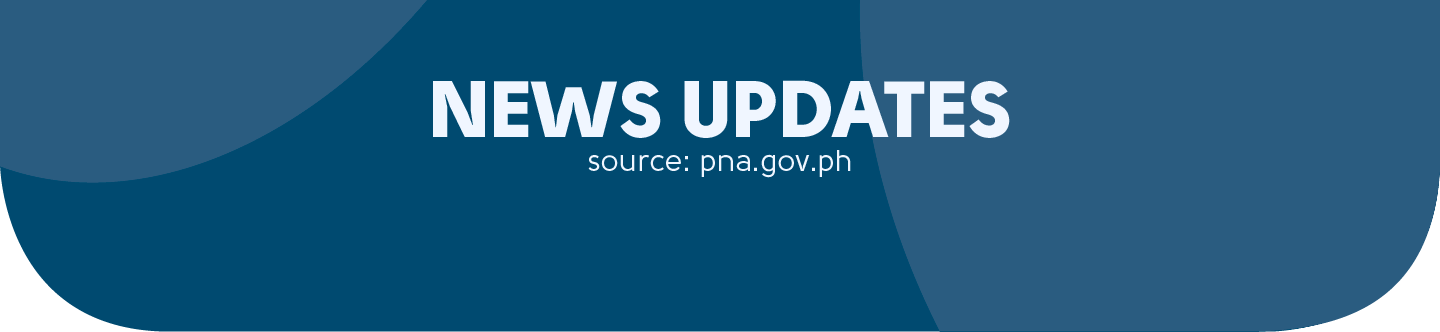
<style>
.page{position:relative;width:1440px;height:332px;background:#2a5c80}
.page>*{position:absolute;margin:0}
.t1{font:80px "Solomon-Sans-Black";color:#f0f6ff}
.t2{font:30px "Solomon-Sans-Normal";color:#f0f6ff}
</style>
<div class="page">
<p class="t1" style="left:433px;top:80px;width:577px;height:58px">NEWS UPDATES</p>
<p class="t2" style="left:588px;top:150px;width:263px;height:28px">source: pna.gov.ph</p>
</div>
